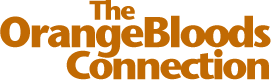
<style>
.page{position:relative;width:271px;height:80px;background:#ffffff}
.page>*{position:absolute;margin:0}
.t1{font:42.7px/27.6px "StoneSansITC-Bold";letter-spacing:-0.08em;color:#c16a03}
.t2{font:26.7px/27.6px "StoneSansITC-Bold";letter-spacing:-0.08em;color:#c16a03}
.t3{font:40px/32px "StoneSansITC-Bold";letter-spacing:-0.08em;color:#c16a03}
</style>
<div class="page">
<p class="t1" style="left:0px;top:0px;width:271px;height:80px;text-align:right"><span class="t2">The</span>                 <br>OrangeBloods<br><span class="t3">Connection</span></p>
</div>
